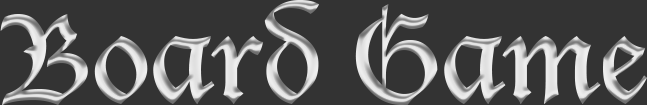
<style>
.page{position:relative;width:647px;height:105px;background:#333333}
.page>*{position:absolute;margin:0}
.t1{font:120px "LucidaBlackletter";color:#dfdfdf}
</style>
<div class="page">
<p class="t1" style="left:0px;top:0px;width:647px;height:105px">Board Game</p>
</div>
